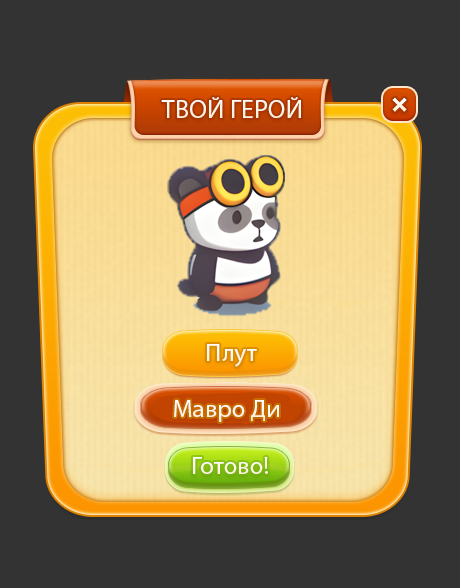
<style>
.page{position:relative;width:460px;height:588px;background:#333333}
.page>*{position:absolute;margin:0}
.t1{font:26px "MyriadPro-Regular";color:#ffffff}
.t2{font:25px "MyriadPro-Regular";color:#ffffff}
.t3{font:25px "MyriadPro-Regular";color:#fdf6e8}
</style>
<div class="page">
<p class="t1" style="left:161px;top:97px;width:140px;height:21px">ТВОЙ ГЕРОЙ</p>
<p class="t2" style="left:207px;top:344px;width:50px;height:23px">Плут</p>
<p class="t2" style="left:174px;top:400px;width:105px;height:22px">Мавро Ди</p>
<p class="t3" style="left:193px;top:457px;width:75px;height:17px">Готово!</p>
</div>
